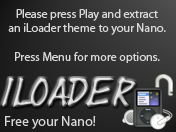
<style>
.page{position:relative;width:176px;height:132px}
.page>*{position:absolute;margin:0}
.t1{font:12px "MyriadPro-Regular";color:#d8d8d8}
.t2{font:30px "Yearsupplyoffairycakes"}
.t3{font:14px "MyriadPro-Regular";color:#d8d8d8}
</style>
<div class="page">
<p class="t1" style="left:8px;top:9px;width:158px;height:54px;text-align:center">Please press Play and extract<br>an iLoader theme to your Nano.<br><br>Press Menu for more options.</p>
<p class="t2" style="left:2px;top:78px;width:134px;height:29px">iLoader</p>
<p class="t3" style="left:5px;top:116px;width:91px;height:13px">Free your Nano!</p>
</div>
